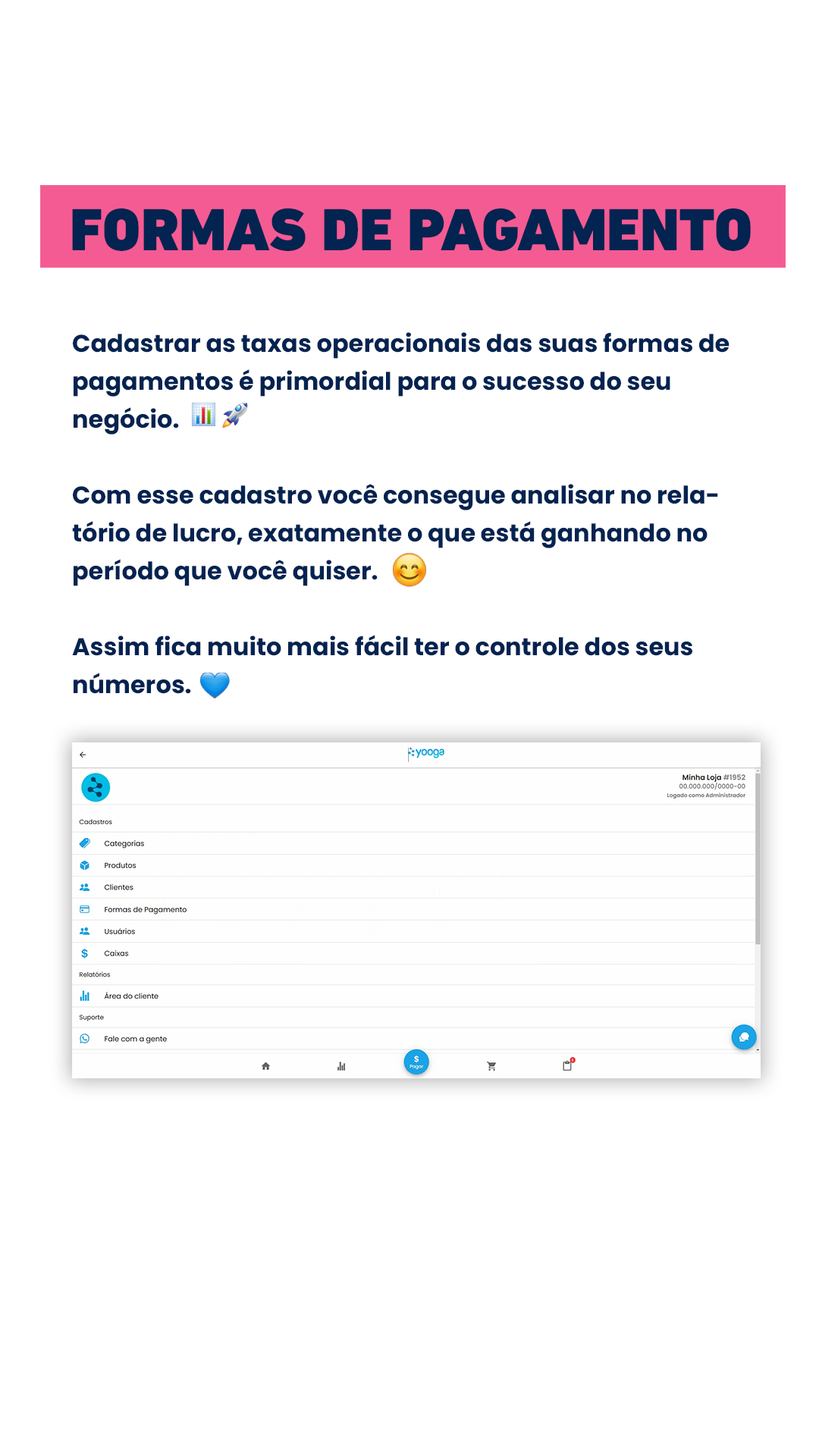
<style>
.page{position:relative;width:819px;height:1456px;background:#ffffff}
.page>*{position:absolute;margin:0}
.t1{font:60.5px "DINNextLTPro-Black";color:#032351;text-transform:uppercase}
.t2{font:24.3px/37.9px "Poppins-Bold";color:#032351}
</style>
<div class="page">
<p class="t1" style="left:72px;top:208px;width:679px;height:43px">Formas de Pagamento</p>
<p class="t2" style="left:72px;top:332px;width:658px;height:362px">Cadastrar as taxas operacionais das suas formas de pagamentos é primordial para o sucesso do seu<br>negócio.<br><br>Com esse cadastro você consegue analisar no relatório de lucro, exatamente o que está ganhando no período que você quiser.<br><br>Assim fica muito mais fácil ter o controle dos seus números.</p>
</div>
